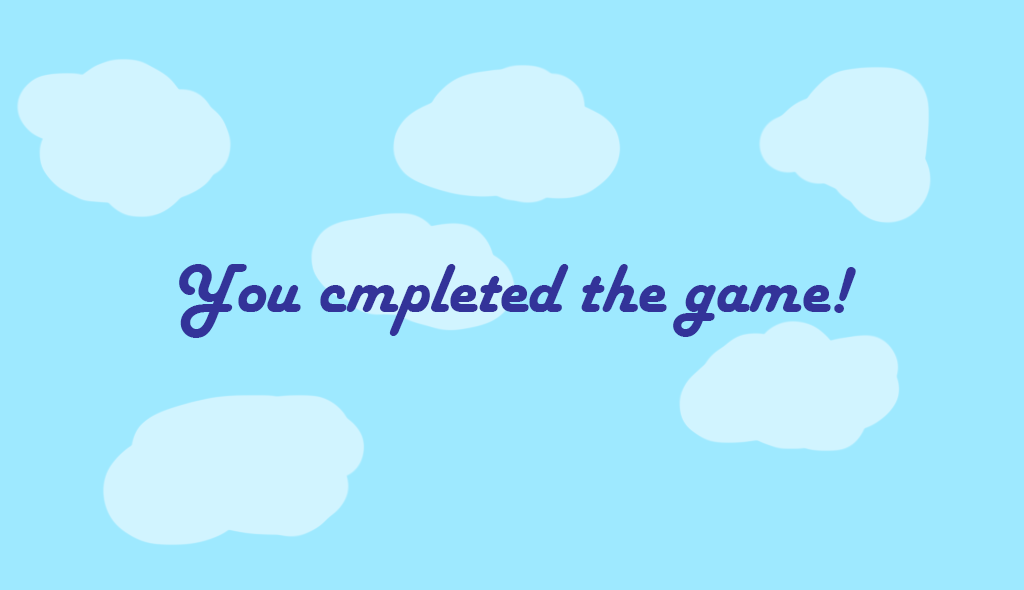
<style>
.page{position:relative;width:1024px;height:590px;background:#9ee9ff}
.page>*{position:absolute;margin:0}
.t1{font:72px "HarlowSolid";color:#333399}
</style>
<div class="page">
<p class="t1" style="left:179px;top:264px;width:677px;height:74px">You cmpleted the game!</p>
</div>
